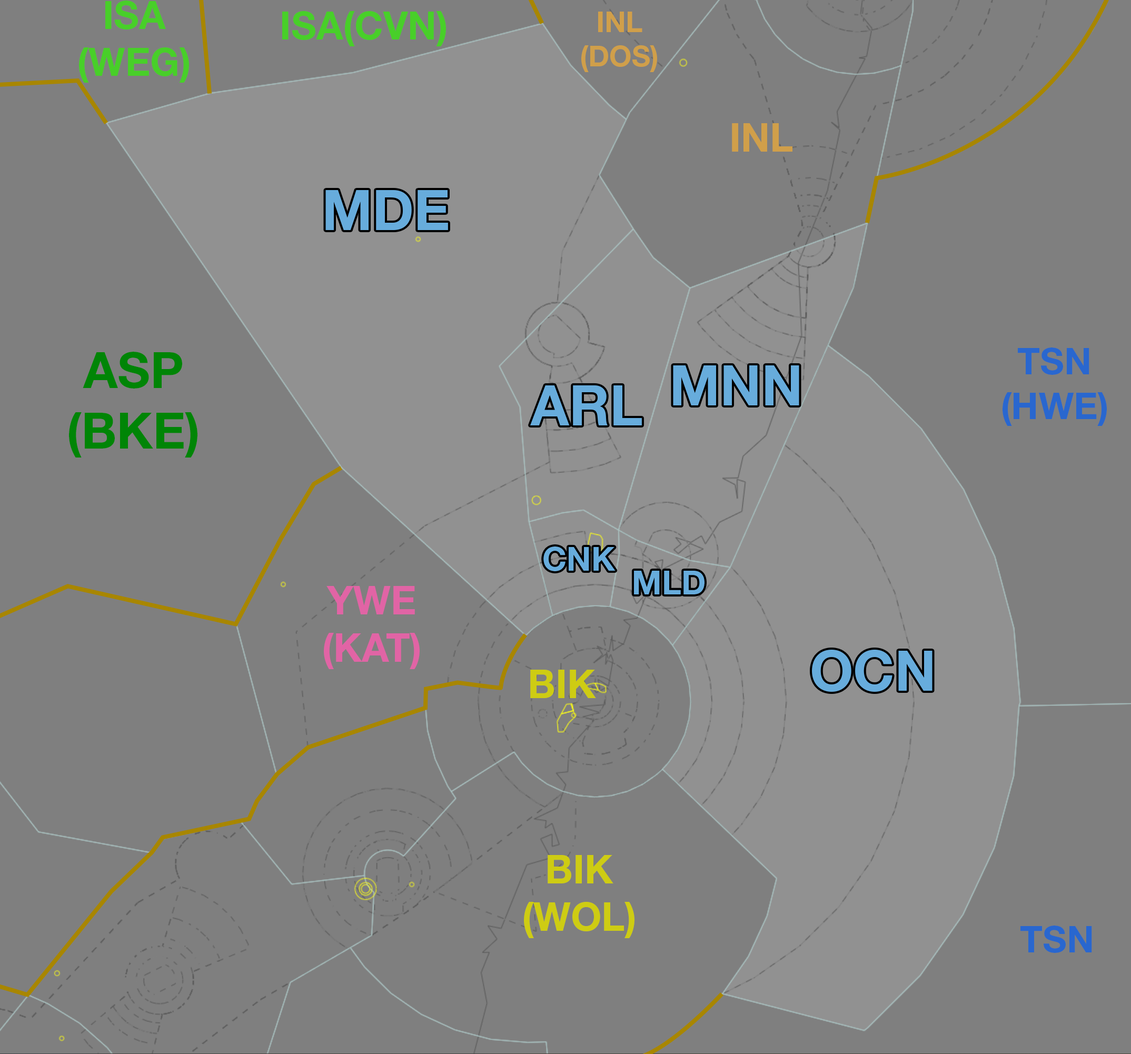
<style>
.page{position:relative;width:1131px;height:1054px;background:#7f7f7f}
.page>*{position:absolute;margin:0}
.t1{font:38.8px "HelveticaNeueLTStd-Bd";color:#48cf29}
.t2{font:28.7px "HelveticaNeueLTStd-Bd";color:#d09f4a}
.t3{font:39.5px "HelveticaNeueLTStd-Bd";color:#d09f4a}
.t4{font:55.9px "HelveticaNeueLTStd-Bd";color:#67acdc}
.t5{font:50.1px "HelveticaNeueLTStd-Bd";color:#008506}
.t6{font:37.2px "HelveticaNeueLTStd-Bd";color:#2967cf}
.t7{font:33px "HelveticaNeueLTStd-Bd";color:#67acdc}
.t8{font:39.5px "HelveticaNeueLTStd-Bd";color:#e164a5}
.t9{font:39.5px "HelveticaNeueLTStd-Bd";color:#cecc13}
</style>
<div class="page">
<p class="t1" style="left:79px;top:1px;width:110px;height:82px;text-align:center">ISA<br>(WEG)</p>
<p class="t1" style="left:282px;top:11px;width:164px;height:35px">ISA(CVN)</p>
<p class="t2" style="left:581px;top:12px;width:76px;height:60px;text-align:center">INL<br>(DOS)</p>
<p class="t3" style="left:732px;top:123px;width:61px;height:29px">INL</p>
<p class="t4" style="left:325px;top:190px;width:123px;height:40px">MDE</p>
<p class="t5" style="left:69px;top:352px;width:128px;height:106px;text-align:center">ASP<br>(BKE)</p>
<p class="t6" style="left:1003px;top:348px;width:104px;height:78px;text-align:center">TSN<br>(HWE)</p>
<p class="t4" style="left:673px;top:365px;width:126px;height:40px">MNN</p>
<p class="t4" style="left:530px;top:385px;width:112px;height:40px">ARL</p>
<p class="t7" style="left:543px;top:547px;width:73px;height:24px">CNK</p>
<p class="t7" style="left:634px;top:571px;width:71px;height:24px">MLD</p>
<p class="t8" style="left:324px;top:586px;width:96px;height:83px;text-align:center">YWE<br>(KAT)</p>
<p class="t4" style="left:812px;top:650px;width:121px;height:42px">OCN</p>
<p class="t9" style="left:530px;top:670px;width:66px;height:28px">BIK</p>
<p class="t9" style="left:524px;top:855px;width:111px;height:83px;text-align:center">BIK<br>(WOL)</p>
<p class="t6" style="left:1021px;top:926px;width:71px;height:27px">TSN</p>
</div>
